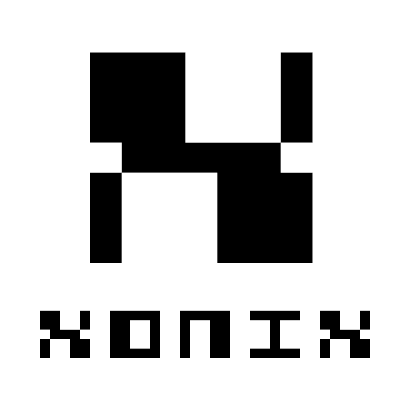
<style>
.page{position:relative;width:400px;height:400px;background:#ffffff}
.page>*{position:absolute;margin:0}
.t1{font:240.7px "Qix-(large)";color:#000000;scale:1.06 1}
.t2{font:56.8px "Qix-(small)";color:#000000;scale:1.06 1}
</style>
<div class="page">
<p class="t1" style="left:90px;top:52px;width:223px;height:211px">X</p>
<p class="t2" style="left:40px;top:310px;width:330px;height:48px">XOnix</p>
</div>
